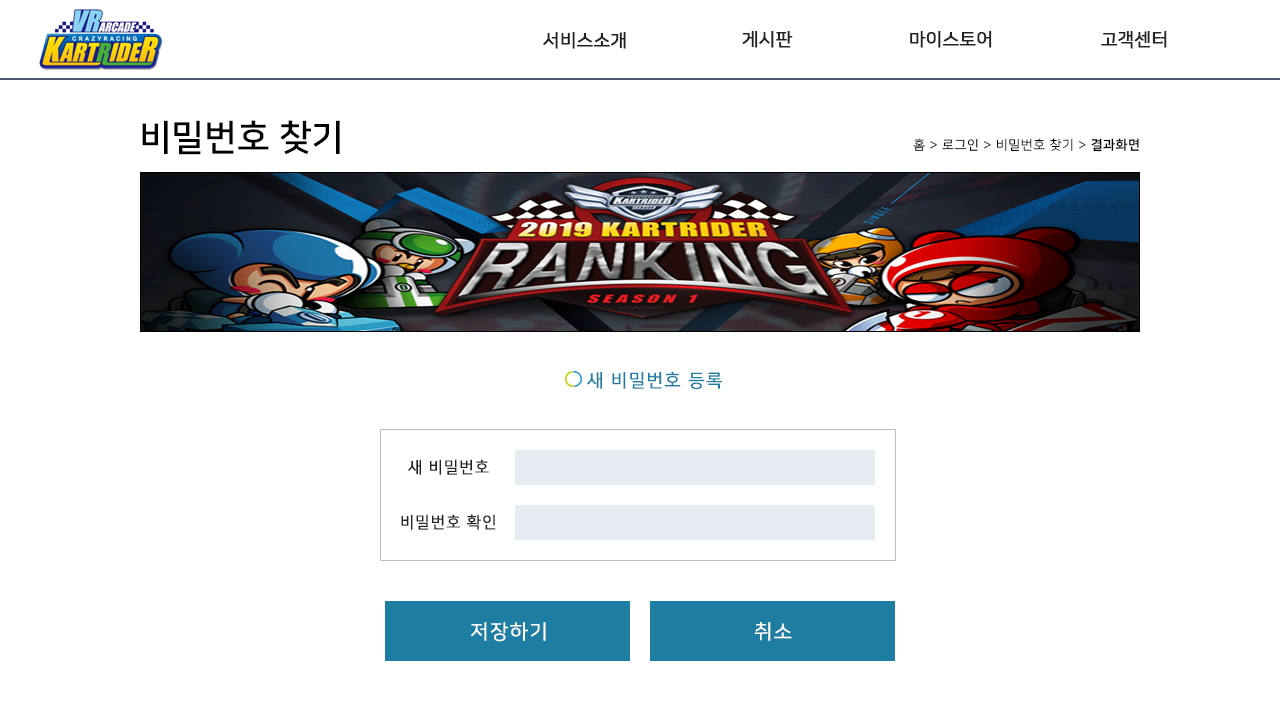
<style>
.page{position:relative;width:1280px;height:705px;background:#ffffff}
.page>*{position:absolute;margin:0}
.t1{font:18px "NanumSquareR";color:#222222;font-weight:bold}
.t2{font:36px "NanumSquareB";color:#000000}
.t3{font:13px "NanumSquareR";letter-spacing:0.05em;color:#000000}
.t4{font:13px "NanumSquareL";letter-spacing:0.05em;color:#000000}
.t5{font:13px "NanumSquareB";letter-spacing:0.05em;color:#000000}
.t6{font:18px "NanumSquareR";letter-spacing:0.05em;color:#1d7da3;text-transform:uppercase;font-weight:bold}
.t7{font:16px "NanumSquareR";letter-spacing:0.05em;color:#222222;text-transform:uppercase;font-weight:bold}
.t8{font:20px "NanumSquareR";letter-spacing:0.05em;color:#ffffff;font-weight:bold}
</style>
<div class="page">
<p class="t1" style="left:742px;top:30px;width:51px;height:18px">게시판</p>
<p class="t1" style="left:910px;top:30px;width:82px;height:18px">마이스토어</p>
<p class="t1" style="left:1101px;top:30px;width:66px;height:18px">고객센터</p>
<p class="t1" style="left:543px;top:31px;width:83px;height:18px">서비스소개</p>
<p class="t2" style="left:142px;top:120px;width:198px;height:35px">비밀번호 찾기</p>
<p class="t3" style="left:913px;top:138px;width:226px;height:14px">홈 &gt; 로그인 &gt; <span class="t4">비밀번호 찾기 &gt;</span><span class="t5"> 결과화면</span></p>
<p class="t6" style="left:587px;top:371px;width:135px;height:19px">새 비밀번호 등록</p>
<p class="t7" style="left:408px;top:459px;width:81px;height:16px">새 비밀번호</p>
<p class="t7" style="left:401px;top:514px;width:95px;height:16px">비밀번호 확인</p>
<p class="t8" style="left:471px;top:622px;width:75px;height:20px">저장하기</p>
<p class="t8" style="left:754px;top:622px;width:38px;height:19px">취소</p>
</div>
